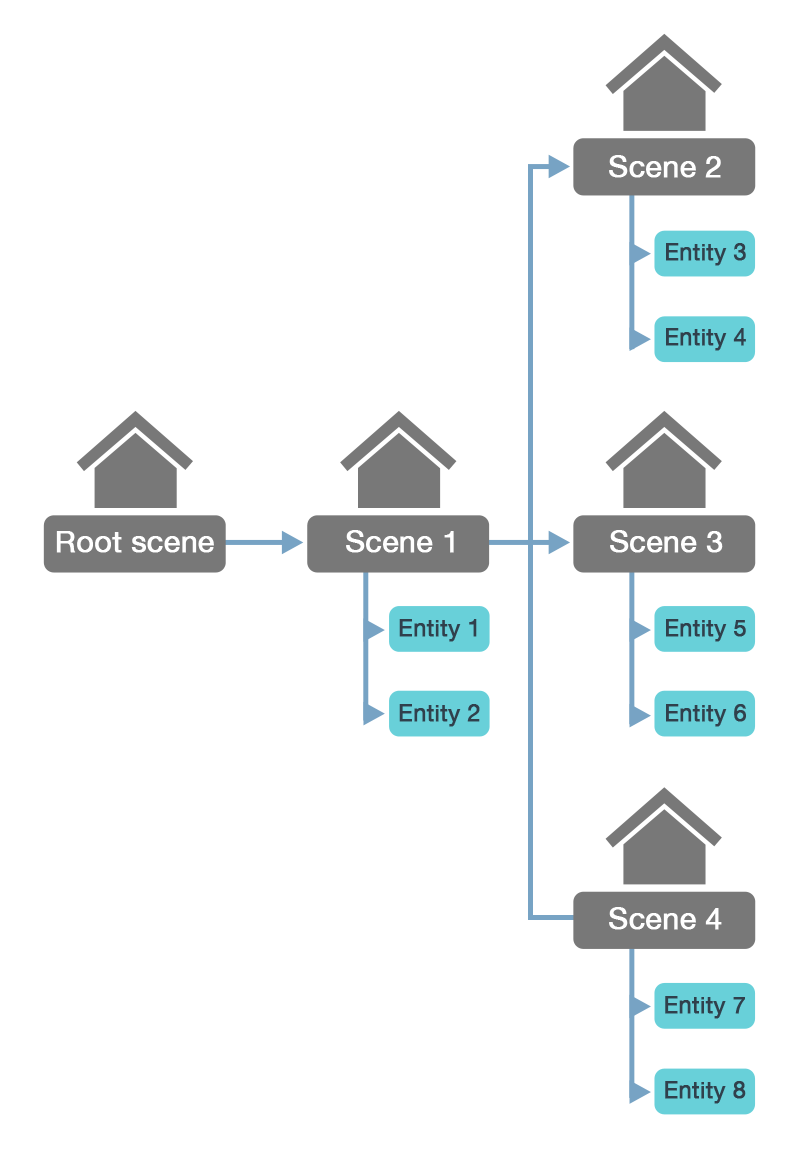
<style>
.page{position:relative;width:800px;height:1171px;background:#ffffff}
.page>*{position:absolute;margin:0}
.t1{font:30.1px "HelveticaNeue";letter-spacing:-0.005em;color:#ffffff;font-weight:bold}
.t2{font:23.4px "HelveticaNeue";letter-spacing:-0.005em;color:#30404c;font-weight:bold}
</style>
<div class="page">
<p class="t1" style="left:609px;top:155px;width:112px;height:23px">Scene 2</p>
<p class="t2" style="left:666px;top:243px;width:80px;height:23px">Entity 3</p>
<p class="t2" style="left:666px;top:328px;width:80px;height:23px">Entity 4</p>
<p class="t1" style="left:56px;top:531px;width:158px;height:22px">Root scene</p>
<p class="t1" style="left:346px;top:530px;width:108px;height:23px">Scene 1</p>
<p class="t1" style="left:610px;top:530px;width:113px;height:23px">Scene 3</p>
<p class="t2" style="left:399px;top:619px;width:78px;height:23px">Entity 1</p>
<p class="t2" style="left:666px;top:619px;width:80px;height:23px">Entity 5</p>
<p class="t2" style="left:399px;top:704px;width:81px;height:23px">Entity 2</p>
<p class="t2" style="left:666px;top:704px;width:80px;height:23px">Entity 6</p>
<p class="t1" style="left:609px;top:907px;width:113px;height:23px">Scene 4</p>
<p class="t2" style="left:665px;top:996px;width:80px;height:23px">Entity 7</p>
<p class="t2" style="left:665px;top:1081px;width:81px;height:23px">Entity 8</p>
</div>
